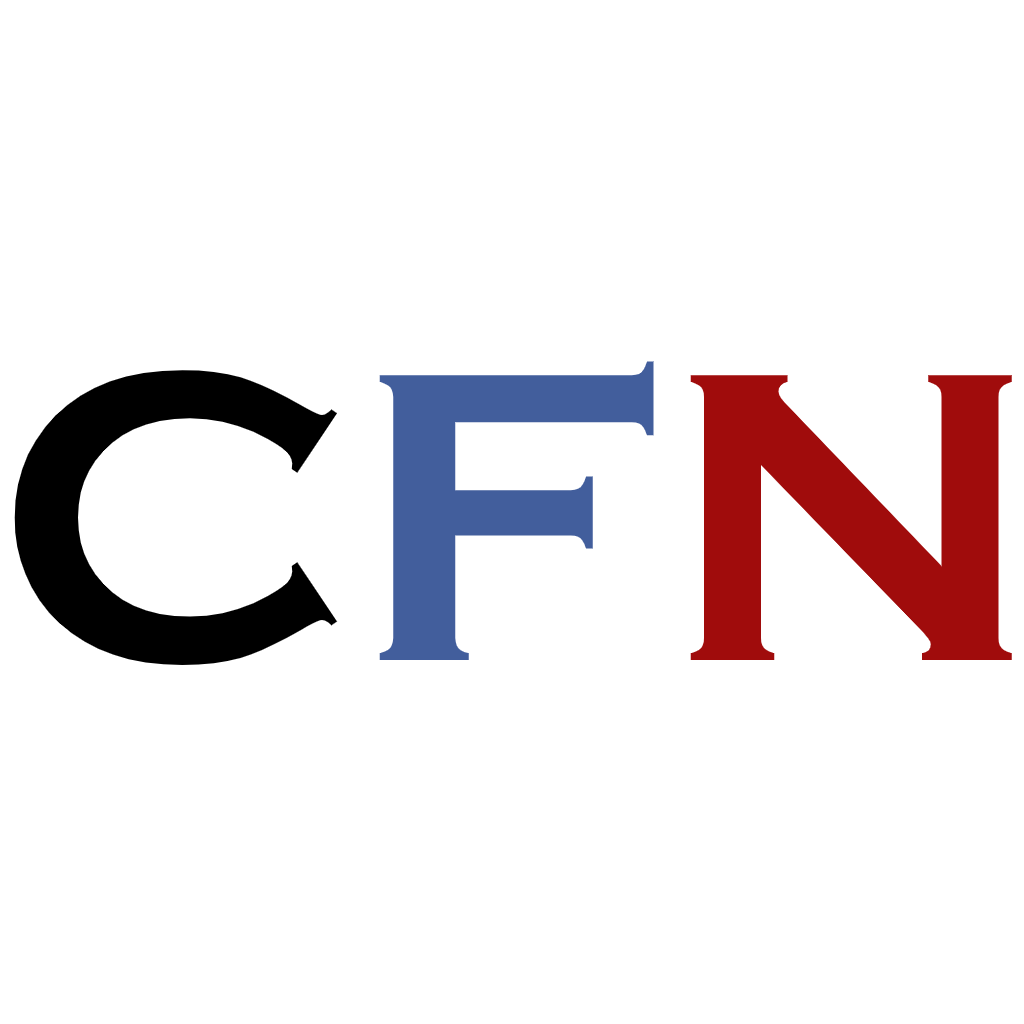
<style>
.page{position:relative;width:1024px;height:1024px;background:#ffffff}
.page>*{position:absolute;margin:0}
.t1{font:427.3px "CopperplateGothic-Bold";color:#000000}
.t2{font:427.3px "CopperplateGothic-Bold";color:#425e9c}
.t3{font:427.3px "CopperplateGothic-Bold";color:#a00c0c}
</style>
<div class="page">
<p class="t1" style="left:14px;top:361px;width:998px;height:304px">C<span class="t2">F</span><span class="t3">N</span></p>
</div>
